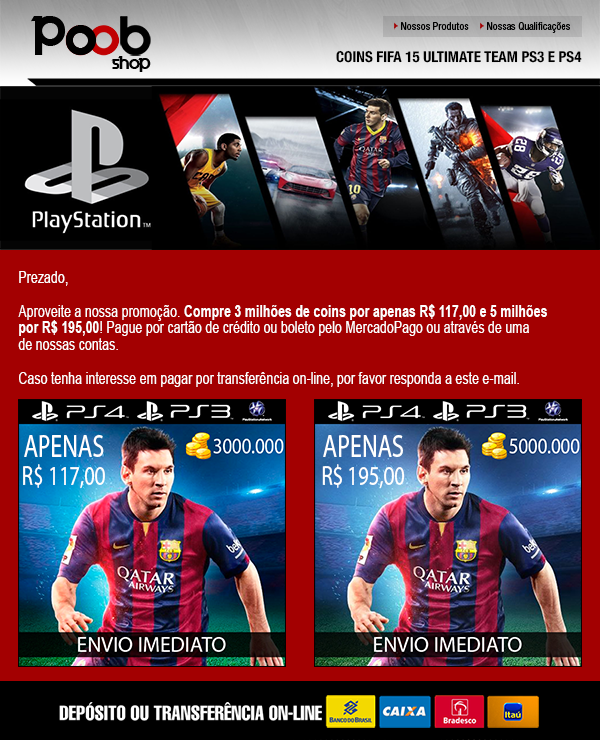
<style>
.page{position:relative;width:600px;height:740px;background:#a30001}
.page>*{position:absolute;margin:0}
.t1{font:43px "Velocity";color:#010101}
.t2{font:41px "Velocity";color:#010101}
.t3{font:43px "Velocity";color:#000000}
.t4{font:10px "HelveticaLTStd-Cond";color:#000000}
.t5{font:15px "HelveticaNeue-CondensedBold";color:#000000}
.t6{font:14.9px "Velocity";color:#000000}
.t7{font:16.8px "ArialMT";color:#ffffff;scale:0.74 1}
.t8{font:16.8px "Arial-BoldMT";color:#ffffff;scale:0.74 1}
.t9{font:27.9px "MyriadPro-Regular";color:#ffffff;scale:0.74 1}
.t10{font:32.1px "MyriadPro-Regular";color:#ffffff;scale:0.74 1}
.t11{font:20px "HelveticaLTStd-Comp";color:#ffffff}
</style>
<div class="page">
<p class="t1" style="left:31px;top:16px;width:35px;height:39px">P</p>
<p class="t2" style="left:66px;top:26px;width:29px;height:29px">O</p>
<p class="t3" style="left:66px;top:25px;width:31px;height:30px">O</p>
<p class="t4" style="left:401px;top:22px;width:68px;height:8px">Nossos Produtos</p>
<p class="t4" style="left:487px;top:22px;width:83px;height:11px">Nossas Qualificações</p>
<p class="t5" style="left:336px;top:50px;width:246px;height:13px">COINS FIFA 15 ULTIMATE TEAM PS3 E PS4</p>
<p class="t6" style="left:111px;top:56px;width:40px;height:16px">shop</p>
<p class="t7" style="left:18px;top:271px;width:529px;height:116px">Prezado,<br><br>Aproveite a nossa promoção. <span class="t8">Compre 3 milhões de coins por apenas R$ 117,00 e 5 milhões<br>por R$ 195,00</span>! Pague por cartão de crédito ou boleto pelo MercadoPago ou através de uma<br>de nossas contas.<br><br>Caso tenha interesse em pagar por transferência on-line, por favor responda a este e-mail.</p>
<p class="t9" style="left:23px;top:435px;width:82px;height:54px;text-align:center"><span class="t10">APENAS<br></span>R$ 117,00</p>
<p class="t9" style="left:322px;top:435px;width:83px;height:54px;text-align:center"><span class="t10">APENAS<br></span>R$ 195,00</p>
<p class="t11" style="left:59px;top:702px;width:263px;height:19px">DEPÓSITO OU TRANSFERÊNCIA ON-LINE</p>
</div>
